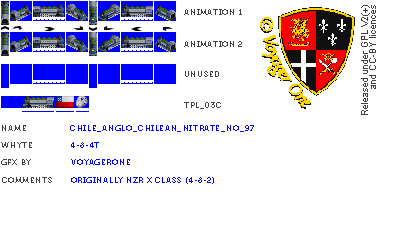
<style>
.page{position:relative;width:400px;height:230px;background:#ffffff}
.page>*{position:absolute;margin:0}
.t1{font:8px "Museo700-Regular";letter-spacing:0.075em;color:#404040;text-transform:uppercase}
.t2{font:8px "Museo700-Regular";letter-spacing:0.075em;color:#0000ff;text-transform:uppercase}
</style>
<div class="page">
<p class="t1" style="left:184px;top:9px;width:58px;height:6px">Animation 1</p>
<p class="t1" style="left:184px;top:41px;width:58px;height:6px">Animation 2</p>
<p class="t1" style="left:185px;top:71px;width:34px;height:6px">unused</p>
<p class="t1" style="left:184px;top:102px;width:37px;height:7px">tpl_03c</p>
<p class="t1" style="left:2px;top:125px;width:24px;height:6px">name</p>
<p class="t2" style="left:70px;top:125px;width:184px;height:7px">Chile_Anglo_Chilean_Nitrate_No_97</p>
<p class="t1" style="left:1px;top:142px;width:31px;height:6px">whyte</p>
<p class="t2" style="left:71px;top:142px;width:28px;height:6px">4-8-4t</p>
<p class="t1" style="left:1px;top:159px;width:30px;height:6px">gfx by</p>
<p class="t2" style="left:71px;top:159px;width:59px;height:6px">voyagerone</p>
<p class="t1" style="left:2px;top:177px;width:50px;height:6px">comments</p>
<p class="t2" style="left:71px;top:177px;width:143px;height:7px">originally nzr x class (4-8-2)</p>
</div>
